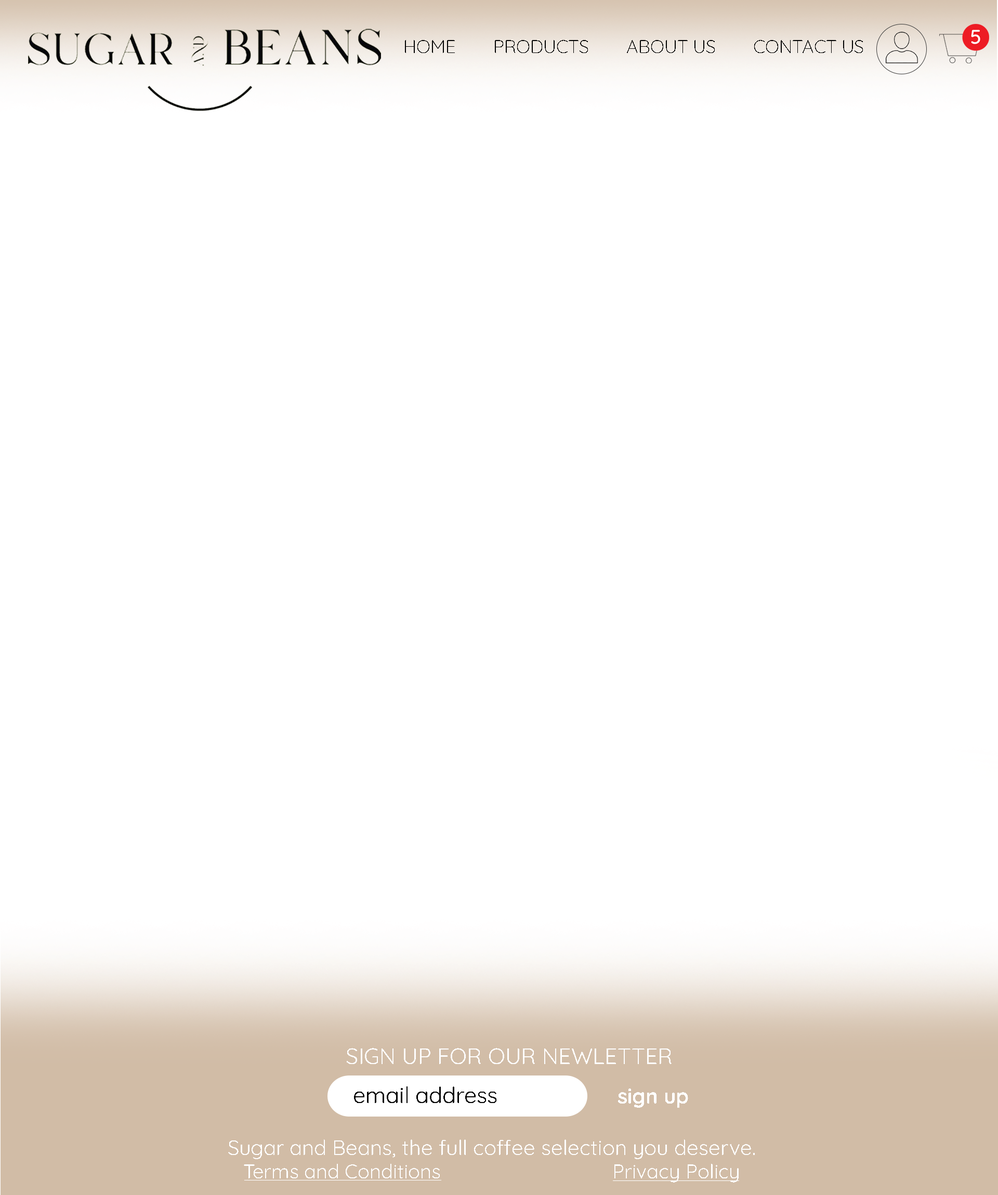
<style>
.page{position:relative;width:998px;height:1195px;background:#ffffff}
.page>*{position:absolute;margin:0}
.t1{font:18.2px "Quicksand-Light";color:#000000}
.t2{font:22.3px "Quicksand-Regular";color:#ffffff}
.t3{font:20.8px "Quicksand-Bold";color:#ffffff}
.t4{font:19.7px "Quicksand-Regular";color:#ffffff}
.t5{font:20.8px "Quicksand-Regular";color:#ffffff}
</style>
<div class="page">
<p class="t1" style="left:405px;top:40px;width:458px;height:13px">HOME        PRODUCTS        ABOUT US        CONTACT US</p>
<p class="t2" style="left:347px;top:1048px;width:324px;height:16px">SIGN UP FOR OUR NEWLETTER</p>
<p class="t3" style="left:618px;top:1089px;width:70px;height:19px">sign up</p>
<p class="t4" style="left:228px;top:1140px;width:527px;height:43px;text-align:center"><span class="t5">Sugar and Beans, the full coffee selection you deserve.<br></span>Terms and Conditions                                 Privacy Policy</p>
</div>
